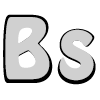
<style>
.page{position:relative;width:100px;height:100px;background:#ffffff}
.page>*{position:absolute;margin:0}
.t1{font:79.2px "HoboStd";color:#d0d0d0;font-weight:bold}
</style>
<div class="page">
<p class="t1" style="left:3px;top:14px;width:93px;height:71px">Bs</p>
</div>
